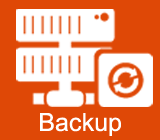
<style>
.page{position:relative;width:160px;height:140px;background:#df4806}
.page>*{position:absolute;margin:0}
.t1{font:25px "ArialMT";color:#ffffff}
</style>
<div class="page">
<p class="t1" style="left:40px;top:113px;width:81px;height:23px">Backup</p>
</div>
